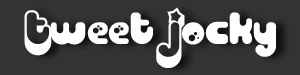
<style>
.page{position:relative;width:300px;height:75px;background:#333333}
.page>*{position:absolute;margin:0}
.t1{font:45px "Billo";color:#ffffff}
</style>
<div class="page">
<p class="t1" style="left:24px;top:7px;width:252px;height:61px">Tweet Jocky</p>
</div>
